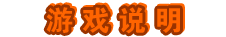
<style>
.page{position:relative;width:226px;height:37px;background:#ffffff}
.page>*{position:absolute;margin:0}
.t1{font:28px "Jdahei";letter-spacing:0.3em}
.t2{font:28px "Jdahei";letter-spacing:0.3em;color:#ff6400}
</style>
<div class="page">
<p class="t1" style="left:48px;top:5px;width:134px;height:27px">游戏说明</p>
<p class="t2" style="left:46px;top:7px;width:134px;height:27px">游戏说明</p>
</div>
